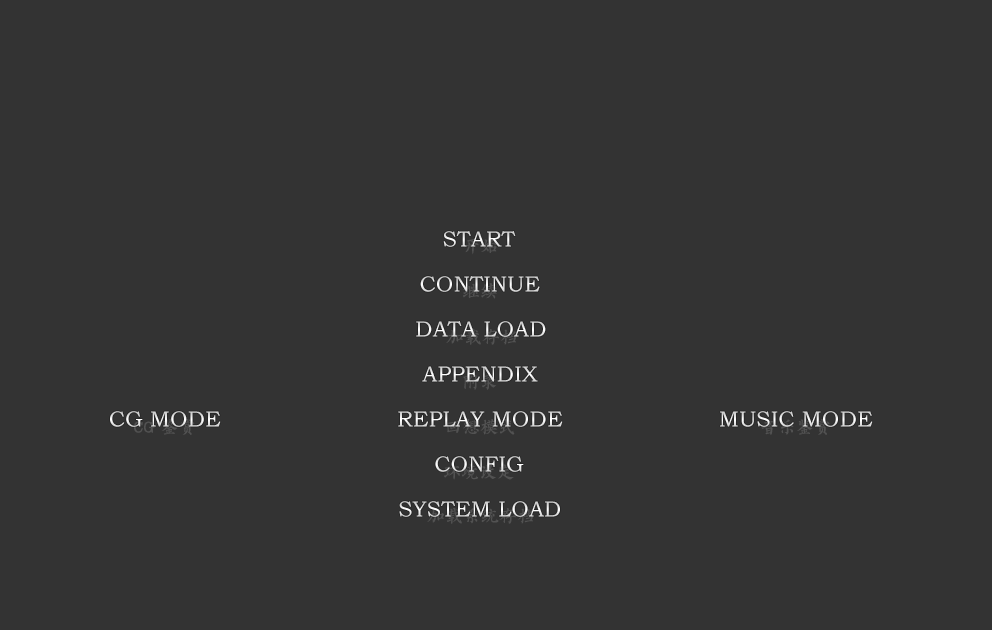
<style>
.page{position:relative;width:992px;height:630px;background:#333333}
.page>*{position:absolute;margin:0}
.t1{font:22px "BookmanOldStyle";color:#e4e4e4}
.t2{font:22px "BookmanOldStyle"}
.t3{font:22px "BookmanOldStyle";color:#e7e7e7}
</style>
<div class="page">
<p class="t1" style="left:443px;top:231px;width:73px;height:16px">START</p>
<p class="t1" style="left:420px;top:276px;width:120px;height:16px">CONTINUE</p>
<p class="t2" style="left:416px;top:321px;width:130px;height:16px">DATA LOAD</p>
<p class="t2" style="left:422px;top:366px;width:116px;height:16px">APPENDIX</p>
<p class="t3" style="left:110px;top:411px;width:111px;height:16px">CG MODE</p>
<p class="t3" style="left:398px;top:411px;width:165px;height:16px">REPLAY MODE</p>
<p class="t1" style="left:720px;top:411px;width:153px;height:16px">MUSIC MODE</p>
<p class="t1" style="left:435px;top:456px;width:89px;height:16px">CONFIG</p>
<p class="t2" style="left:399px;top:501px;width:161px;height:16px">SYSTEM LOAD</p>
</div>
